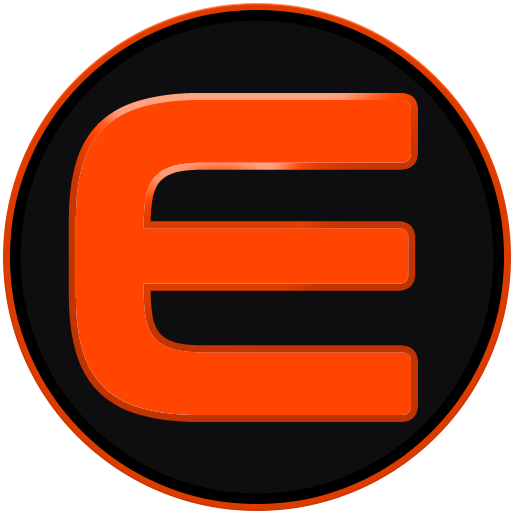
<style>
.page{position:relative;width:512px;height:512px;background:#0e0e10}
.page>*{position:absolute;margin:0}
.t1{font:450px "ConthraxSb-Regular";letter-spacing:0.01em;color:#ff4500}
</style>
<div class="page">
<p class="t1" style="left:75px;top:100px;width:336px;height:315px">E</p>
<p class="t1" style="left:75px;top:100px;width:336px;height:315px">E</p>
</div>
